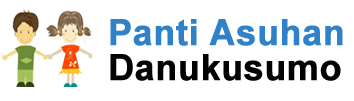
<style>
.page{position:relative;width:354px;height:101px;background:#ffffff}
.page>*{position:absolute;margin:0}
.t1{font:36px "Arial-BoldMT";letter-spacing:-0.01em;color:#3081c8;font-weight:bold}
.t2{font:36px "Arial-BoldMT";letter-spacing:-0.01em;color:#030303;font-weight:bold}
</style>
<div class="page">
<p class="t1" style="left:110px;top:19px;width:233px;height:27px">Panti Asuhan</p>
<p class="t2" style="left:110px;top:54px;width:231px;height:27px">Danukusumo</p>
</div>
